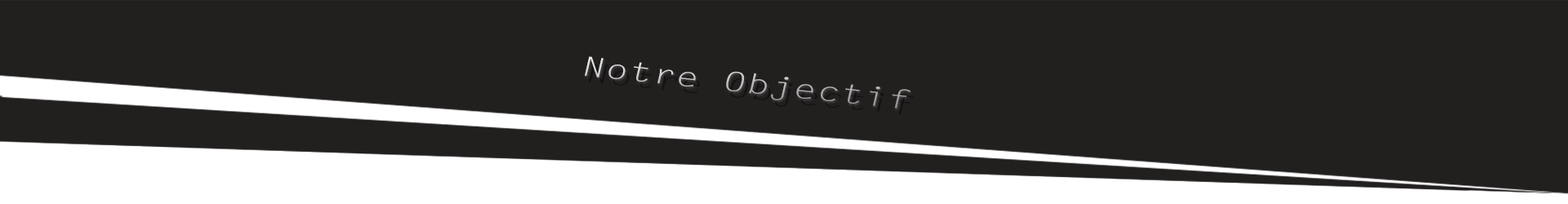
<style>
.page{position:relative;width:1568px;height:204px;background:#221f1f}
.page>*{position:absolute;margin:0}
.t1{font:26.9px "LetterGothicStd";scale:1.46 1}
</style>
<div class="page">
<p class="t1" style="left:585px;top:56px;width:326px;height:53px;rotate:6deg">Notre Objectif</p>
</div>
